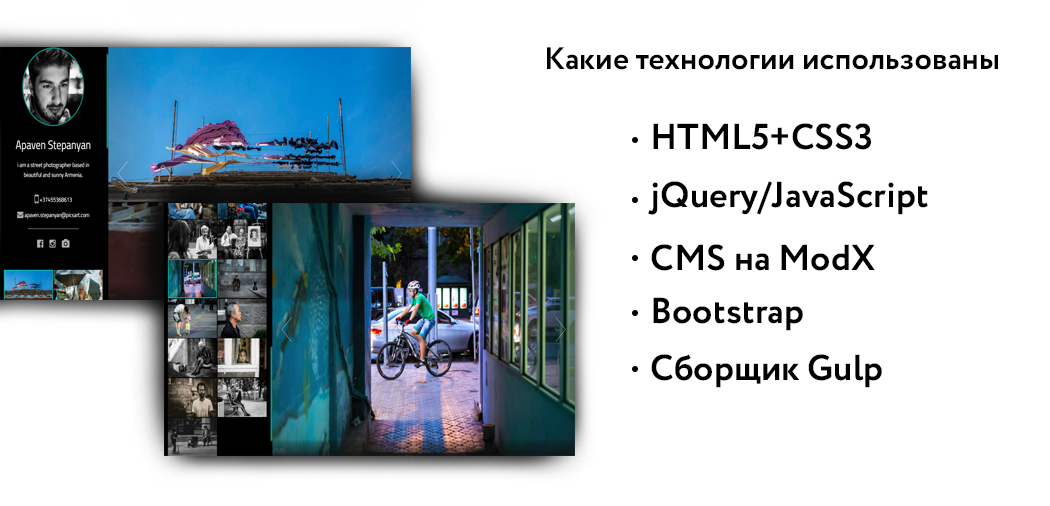
<style>
.page{position:relative;width:1050px;height:506px;background:#ffffff}
.page>*{position:absolute;margin:0}
.t1{font:31px "Circe-Bold";color:#000000}
.t2{font:36px "Circe-Bold";color:#000000}
</style>
<div class="page">
<p class="t1" style="left:547px;top:47px;width:451px;height:23px">Какие технологии использованы</p>
<p class="t2" style="left:653px;top:123px;width:218px;height:27px">HTML5+CSS3</p>
<p class="t2" style="left:648px;top:181px;width:280px;height:34px">jQuery/JavaScript</p>
<p class="t2" style="left:651px;top:244px;width:224px;height:27px">CMS на ModX</p>
<p class="t2" style="left:653px;top:297px;width:150px;height:34px">Bootstrap</p>
<p class="t2" style="left:651px;top:354px;width:231px;height:34px">Сборщик Gulp</p>
</div>
